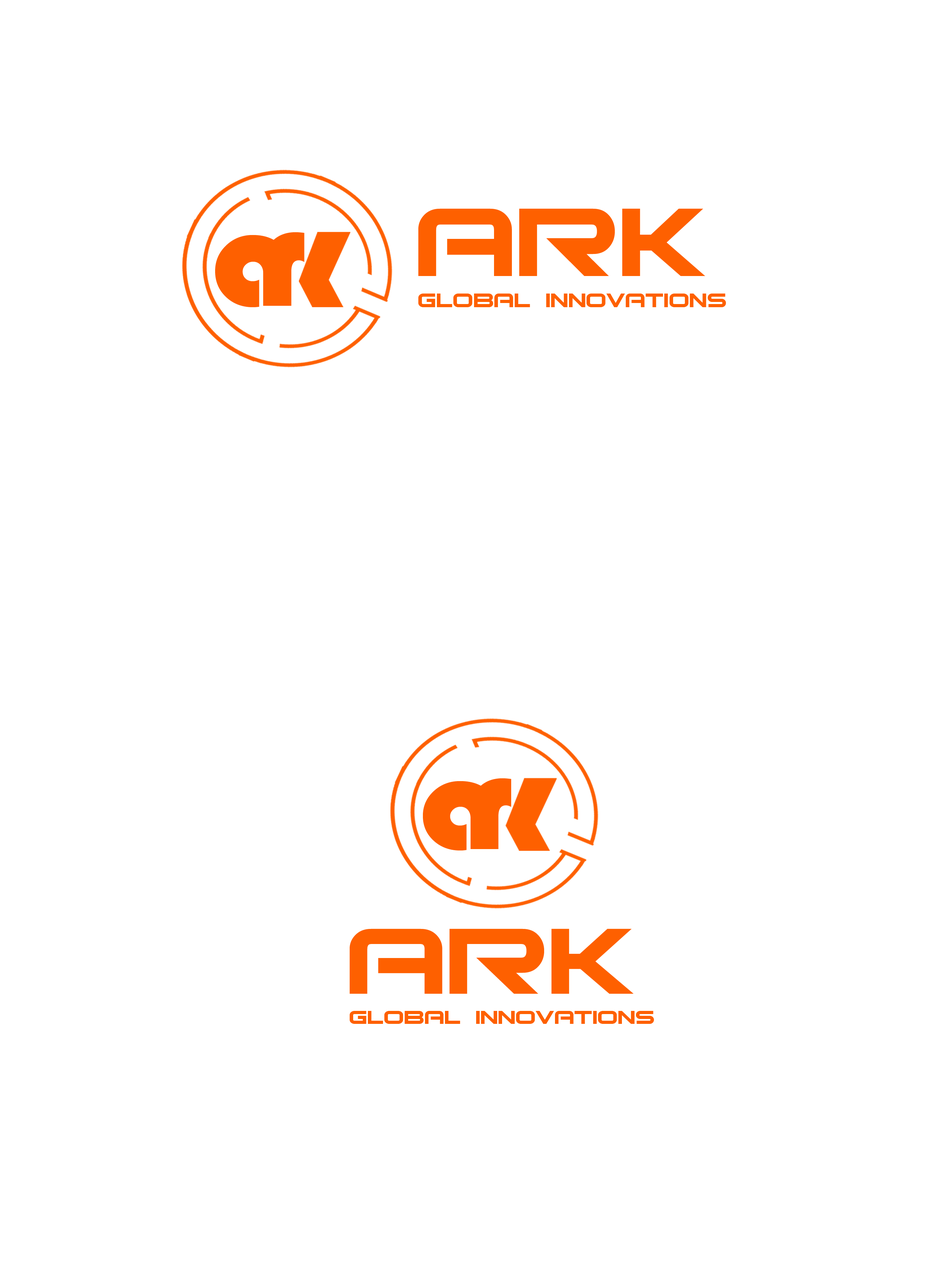
<style>
.page{position:relative;width:946px;height:1261px;background:#ffffff}
.page>*{position:absolute;margin:0}
.t1{font:26.1px "Bitsumishi";color:#fe6000;scale:1.14 1}
.t2{font:130.3px "Bitsumishi";color:#fe6000;scale:1.14 1}
.t3{font:148.2px "Bauhaus93";color:#fe6000;scale:1.04 1}
.t4{font:142.1px "Bauhaus93";color:#fe6000;scale:1.04 1}
.t5{font:136.7px "Bauhaus93";color:#fe6000;scale:1.07 1}
.t6{font:142.5px "Bauhaus93";color:#fe6000;scale:1.07 1}
.t7{font:25.1px "Bitsumishi";color:#fe6000;scale:1.17 1}
.t8{font:125.4px "Bitsumishi";color:#fe6000;scale:1.17 1}
</style>
<div class="page">
<p class="t1" style="left:418px;top:208px;width:308px;height:99px"><span class="t2">ARK <br></span>Global innovations</p>
<p class="t3" style="left:263px;top:232px;width:41px;height:74px">r</p>
<p class="t4" style="left:215px;top:235px;width:75px;height:72px">a</p>
<p class="t5" style="left:423px;top:781px;width:74px;height:69px">a</p>
<p class="t6" style="left:470px;top:778px;width:41px;height:71px">r</p>
<p class="t7" style="left:350px;top:929px;width:304px;height:95px"><span class="t8">ARK <br></span>Global innovations</p>
</div>
